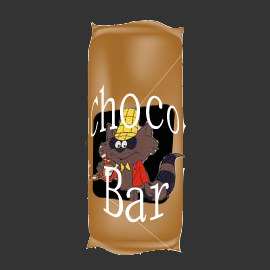
<style>
.page{position:relative;width:270px;height:270px;background:#333333}
.page>*{position:absolute;margin:0}
.t1{font:33.3px "MS-Mincho";color:#ffffff}
</style>
<div class="page">
<p class="t1" style="left:91px;top:84px;width:88px;height:139px">Choco<br>Bar</p>
</div>
